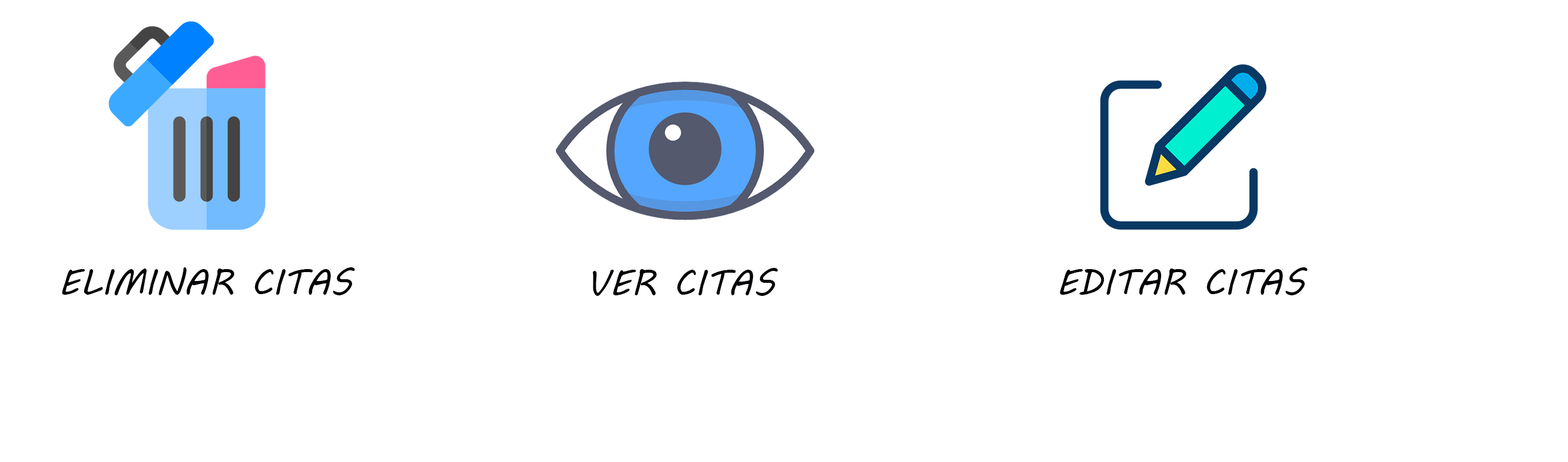
<style>
.page{position:relative;width:1568px;height:462px;background:#ffffff}
.page>*{position:absolute;margin:0}
.t1{font:35.7px "MVBoli";color:#020106;text-transform:uppercase}
</style>
<div class="page">
<p class="t1" style="left:62px;top:267px;width:293px;height:28px">Eliminar citas</p>
<p class="t1" style="left:593px;top:268px;width:185px;height:28px">ver citas</p>
<p class="t1" style="left:1060px;top:267px;width:248px;height:28px">editar citas</p>
</div>
